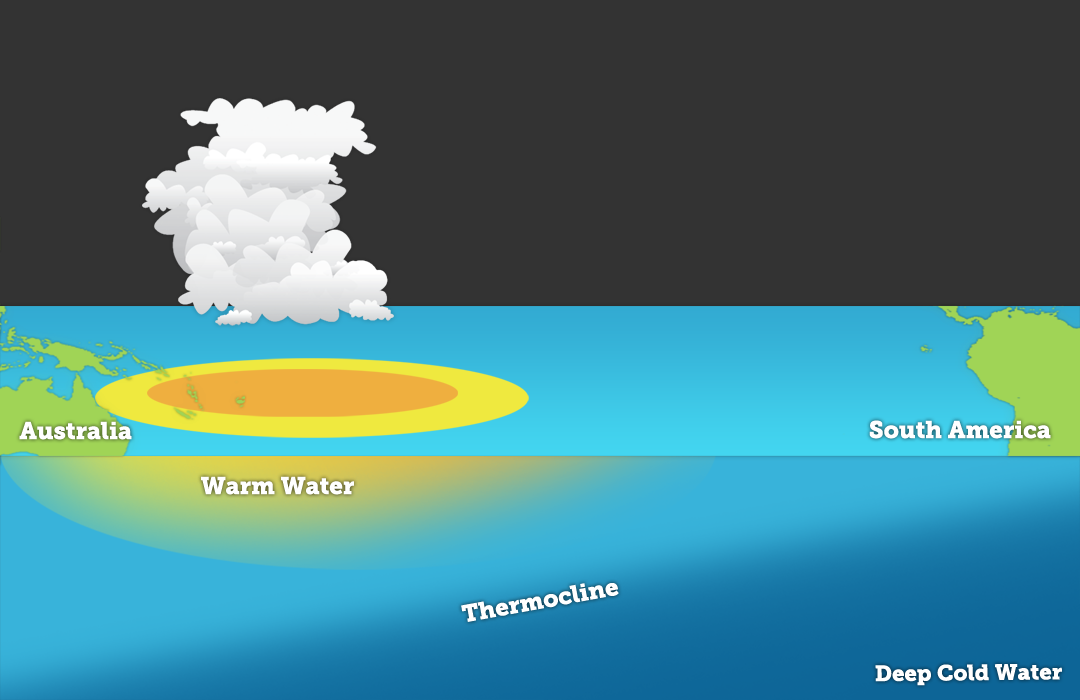
<style>
.page{position:relative;width:1080px;height:700px;background:#333333}
.page>*{position:absolute;margin:0}
.t1{font:24px "MuseoSlab-900";color:#ffffff}
.t2{font:22px "MuseoSlab-900";color:#ffffff}
</style>
<div class="page">
<p class="t1" style="left:19px;top:421px;width:113px;height:19px">Australia</p>
<p class="t1" style="left:869px;top:420px;width:182px;height:19px">South America</p>
<p class="t1" style="left:201px;top:476px;width:153px;height:19px">Warm Water</p>
<p class="t1" style="left:461px;top:583px;width:158px;height:39px;rotate:-10deg">Thermocline</p>
<p class="t2" style="left:875px;top:664px;width:187px;height:22px;rotate:-1deg">Deep Cold Water</p>
</div>
